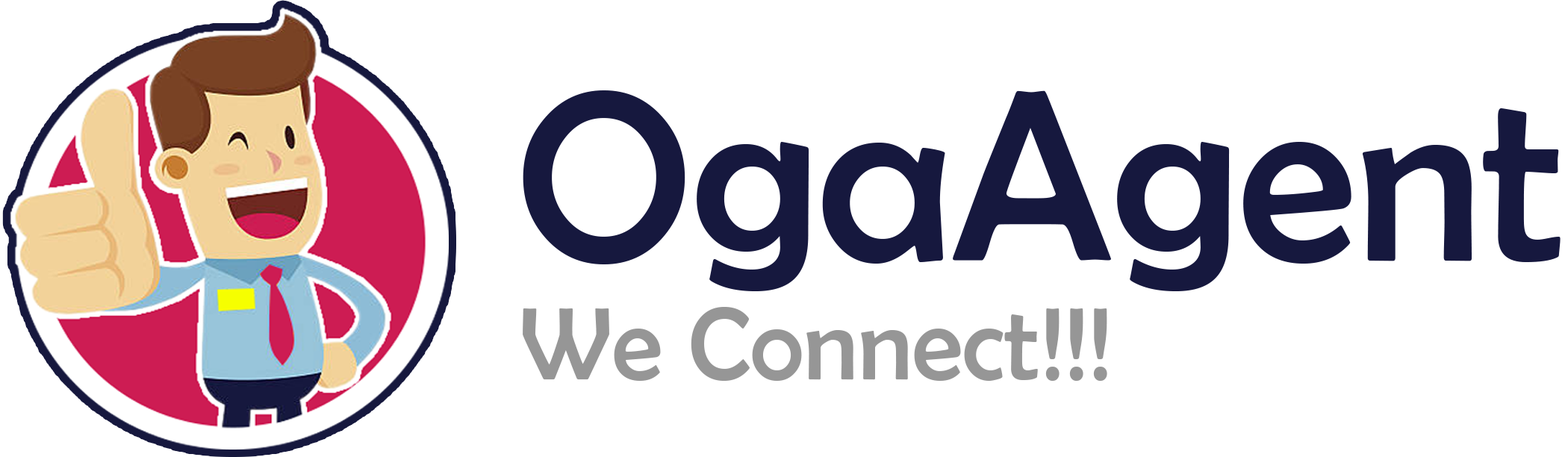
<style>
.page{position:relative;width:1568px;height:457px;background:#ffffff}
.page>*{position:absolute;margin:0}
.t1{font:242.5px "BerlinSansFB-Reg";color:#16183e}
.t2{font:104.1px "BerlinSansFB-Reg";color:#969696}
</style>
<div class="page">
<p class="t1" style="left:523px;top:90px;width:1038px;height:201px">OgaAgent</p>
<p class="t2" style="left:523px;top:307px;width:584px;height:74px">We Connect!!!</p>
</div>
